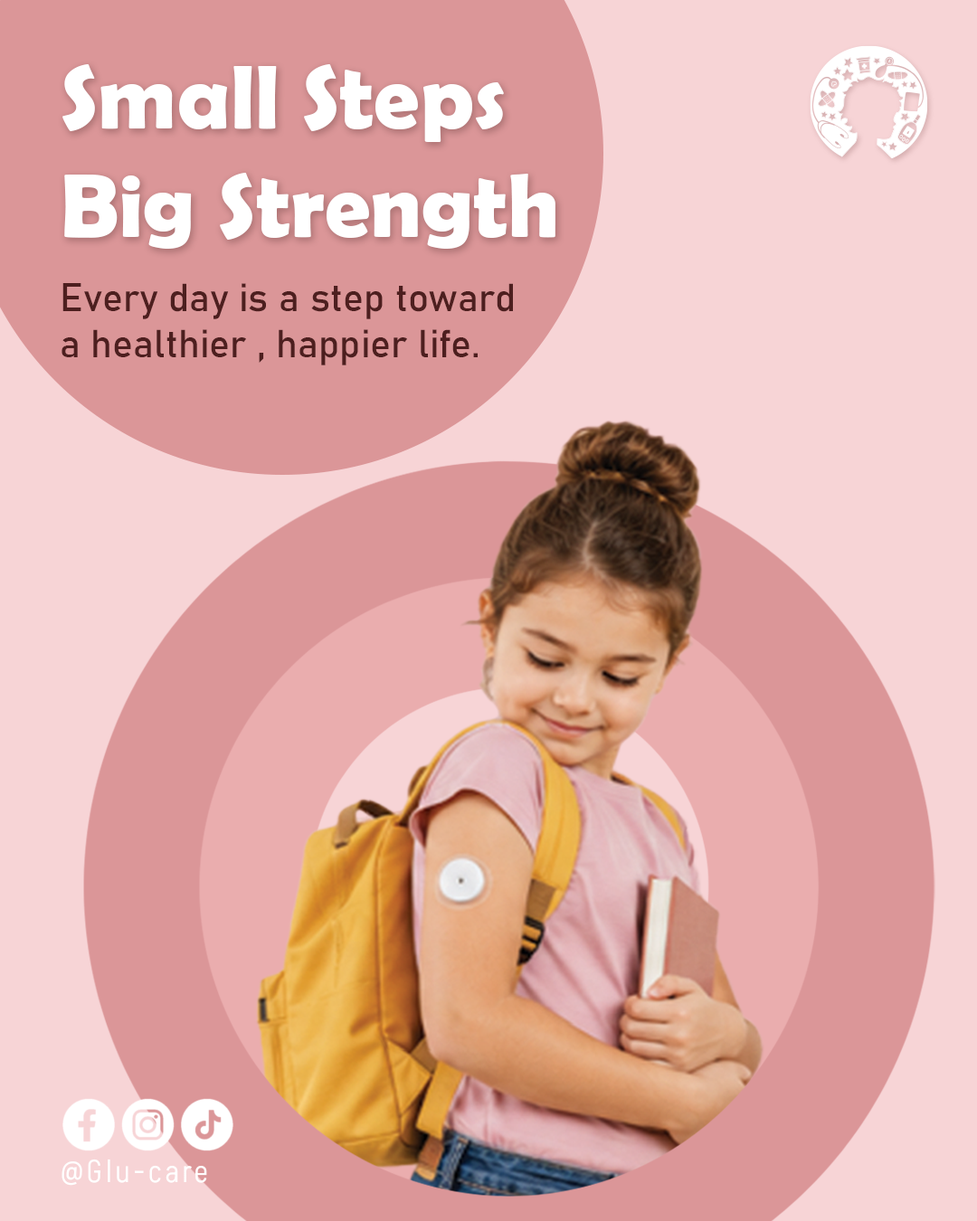
<style>
.page{position:relative;width:977px;height:1221px;background:#f7d4d6}
.page>*{position:absolute;margin:0}
.t1{font:90.9px "BerlinSansFBDemi-Bold";color:#ffffff}
.t2{font:38.8px "Bahnschrift";color:#4d1f1f}
</style>
<div class="page">
<p class="t1" style="left:62px;top:64px;width:493px;height:185px;text-align:right">Small Steps<br>Big Strength</p>
<p class="t2" style="left:61px;top:283px;width:452px;height:82px">Every day is a step toward<br>a healthier , happier life.</p>
</div>
